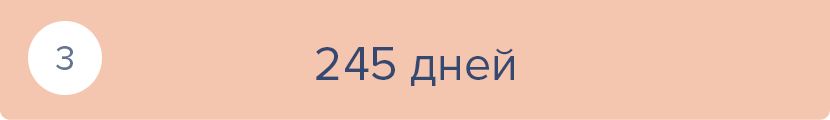
<style>
.page{position:relative;width:830px;height:120px;background:#f4c6b0}
.page>*{position:absolute;margin:0}
.t1{font:36px "ProximaNova-Regular";color:#647493}
.t2{font:48px "ProximaNova-Regular";color:#344870}
</style>
<div class="page">
<p class="t1" style="left:56px;top:46px;width:17px;height:24px">3</p>
<p class="t2" style="left:316px;top:47px;width:198px;height:39px">245 дней</p>
</div>
